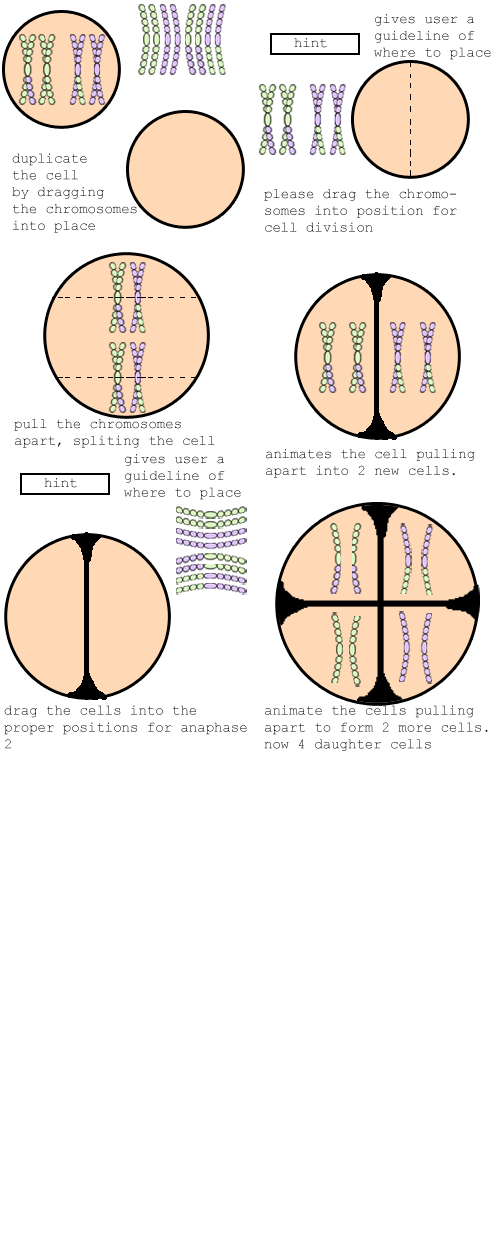
<style>
.page{position:relative;width:500px;height:1250px;background:#ffffff}
.page>*{position:absolute;margin:0}
.t1{font:14px "CourierNewPSMT"}
.t2{font:14px "CourierNewPSMT";color:#000000}
</style>
<div class="page">
<p class="t1" style="left:374px;top:14px;width:117px;height:46px">gives user a <br>guideline of<br>where to place</p>
<p class="t1" style="left:294px;top:38px;width:33px;height:10px">hint</p>
<p class="t1" style="left:12px;top:153px;width:125px;height:80px">duplicate<br>the cell<br>by dragging<br>the chromosomes<br>into place</p>
<p class="t1" style="left:264px;top:189px;width:193px;height:43px">please drag the chromosomes into position for cell division</p>
<p class="t2" style="left:14px;top:419px;width:201px;height:29px">pull the chromosomes apart, spliting the cell</p>
<p class="t2" style="left:266px;top:449px;width:209px;height:29px">animates the cell pulling apart into 2 new cells.</p>
<p class="t1" style="left:124px;top:454px;width:117px;height:46px">gives user a <br>guideline of<br>where to place</p>
<p class="t1" style="left:44px;top:478px;width:33px;height:10px">hint</p>
<p class="t1" style="left:4px;top:705px;width:243px;height:44px">drag the cells into the proper positions for anaphase 2</p>
<p class="t2" style="left:264px;top:705px;width:224px;height:46px">animate the cells pulling apart to form 2 more cells.<br>now 4 daughter cells</p>
</div>
